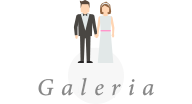
<style>
.page{position:relative;width:192px;height:104px;background:#ffffff}
.page>*{position:absolute;margin:0}
.t1{font:24px "MinionConceptItalic-MediumItalic";letter-spacing:0.3em;color:#888888}
</style>
<div class="page">
<p class="t1" style="left:38px;top:77px;width:116px;height:19px">Galeria</p>
</div>
